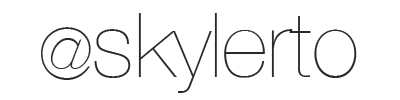
<style>
.page{position:relative;width:400px;height:100px;background:#ffffff}
.page>*{position:absolute;margin:0}
.t1{font:90px "HelveticaNeue-UltraLight";color:#2a2a2a}
.t2{font:72px "HelveticaNeue-UltraLight";color:#2a2a2a}
</style>
<div class="page">
<p class="t1" style="left:94px;top:13px;width:263px;height:80px">skylerto</p>
<p class="t2" style="left:41px;top:27px;width:50px;height:53px">@</p>
</div>
